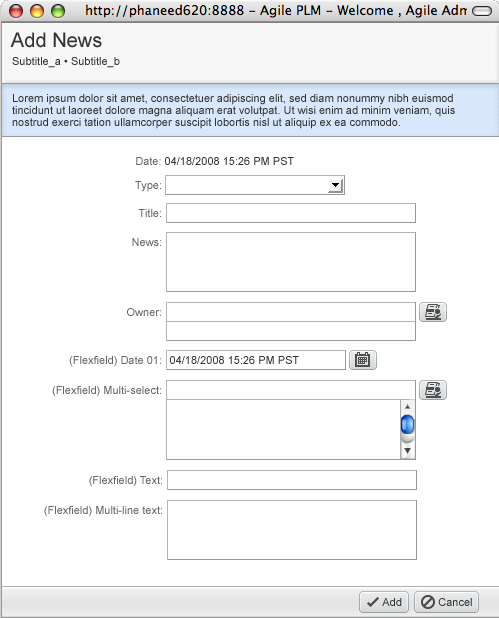
<style>
.page{position:relative;width:499px;height:618px;background:#ffffff}
.page>*{position:absolute;margin:0}
.t1{font:20px "ArialMT";color:#333333}
.t2{font:11px "ArialMT";color:#333333}
.t3{font:11px/12px "ArialMT";color:#333333}
.t4{font:11px "ArialMT";color:#666666}
</style>
<div class="page">
<p class="t1" style="left:10px;top:32px;width:92px;height:16px">Add News</p>
<p class="t2" style="left:12px;top:57px;width:108px;height:11px">Subtitle_a • Subtitle_b</p>
<p class="t3" style="left:12px;top:94px;width:443px;height:35px">Lorem ipsum dolor sit amet, consectetuer adipiscing elit, sed diam nonummy nibh euismod <br>tincidunt ut laoreet dolore magna aliquam erat volutpat. Ut wisi enim ad minim veniam, quis <br>nostrud exerci tation ullamcorper suscipit lobortis nisl ut aliquip ex ea commodo.</p>
<p class="t2" style="left:136px;top:157px;width:158px;height:8px"><span class="t4">Date: </span>04/18/2008 15:26 PM PST</p>
<p class="t4" style="left:135px;top:181px;width:26px;height:11px">Type:</p>
<p class="t4" style="left:138px;top:209px;width:23px;height:8px">Title:</p>
<p class="t4" style="left:132px;top:238px;width:29px;height:8px">News:</p>
<p class="t4" style="left:127px;top:308px;width:34px;height:8px">Owner:</p>
<p class="t4" style="left:69px;top:356px;width:92px;height:11px">(Flexfield) Date 01:</p>
<p class="t2" style="left:170px;top:356px;width:129px;height:8px">04/18/2008 15:26 PM PST</p>
<p class="t4" style="left:52px;top:386px;width:109px;height:11px">(Flexfield) Multi-select:</p>
<p class="t4" style="left:89px;top:476px;width:73px;height:11px">(Flexfield) Text:</p>
<p class="t4" style="left:44px;top:506px;width:118px;height:11px">(Flexfield) Multi-line text:</p>
<p class="t2" style="left:382px;top:598px;width:20px;height:8px">Add</p>
<p class="t2" style="left:438px;top:598px;width:34px;height:8px">Cancel</p>
</div>
